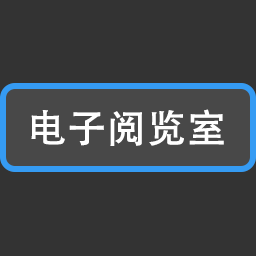
<style>
.page{position:relative;width:256px;height:256px;background:#333333}
.page>*{position:absolute;margin:0}
.t1{font:39px "AdobeHeitiStd-Regular";color:#ffffff;font-weight:bold}
</style>
<div class="page">
<p class="t1" style="left:31px;top:109px;width:193px;height:37px">电子阅览室</p>
</div>
